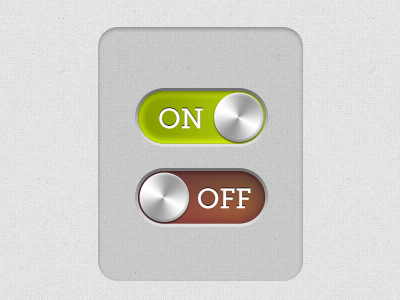
<style>
.page{position:relative;width:400px;height:300px}
.page>*{position:absolute;margin:0}
.t1{font:27.9px "MuseoSlab-500";color:#ffffff}
</style>
<div class="page">
<p class="t1" style="left:159px;top:108px;width:44px;height:21px">ON</p>
<p class="t1" style="left:198px;top:188px;width:53px;height:21px">OFF</p>
</div>
